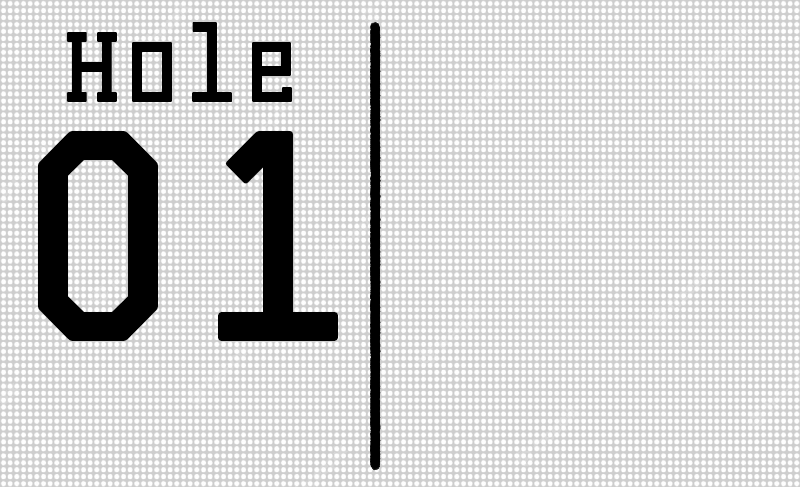
<style>
.page{position:relative;width:800px;height:487px}
.page>*{position:absolute;margin:0}
.t1{font:100px "ElVolcan-Mecana";color:#000000}
.t2{font:300px "ElVolcan-Mecana";color:#000000}
</style>
<div class="page">
<p class="t1" style="left:66px;top:22px;width:226px;height:80px">Hole</p>
<p class="t2" style="left:37px;top:131px;width:301px;height:210px">01</p>
</div>
